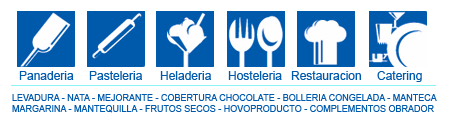
<style>
.page{position:relative;width:450px;height:120px;background:#ffffff}
.page>*{position:absolute;margin:0}
.t1{font:12px "ArialMT";color:#005aac}
.t2{font:9px "ArialMT";color:#005aac}
</style>
<div class="page">
<p class="t1" style="left:19px;top:71px;width:55px;height:9px">Panaderia</p>
<p class="t1" style="left:89px;top:71px;width:53px;height:9px">Pasteleria</p>
<p class="t1" style="left:160px;top:71px;width:51px;height:9px">Heladeria</p>
<p class="t1" style="left:228px;top:71px;width:54px;height:9px">Hosteleria</p>
<p class="t1" style="left:291px;top:71px;width:70px;height:9px">Restauracion</p>
<p class="t1" style="left:377px;top:71px;width:45px;height:11px">Catering</p>
<p class="t2" style="left:12px;top:94px;width:425px;height:19px">LEVADURA - NATA - MEJORANTE - COBERTURA CHOCOLATE - BOLLERIA CONGELADA - MANTECA<br>MARGARINA - MANTEQUILLA - FRUTOS SECOS - HOVOPRODUCTO - COMPLEMENTOS OBRADOR</p>
</div>
